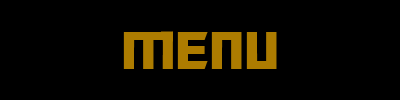
<style>
.page{position:relative;width:400px;height:100px;background:#000000}
.page>*{position:absolute;margin:0}
.t1{font:60px "TransformersMovie";letter-spacing:0.06em;color:#ad7c00}
.t2{font:60px "TransformersMovie";letter-spacing:0.04em;color:#ad7c00}
</style>
<div class="page">
<p class="t1" style="left:123px;top:31px;width:154px;height:38px">m<span class="t2">e</span>n<span class="t2">u</span></p>
</div>
